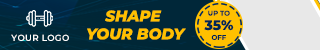
<style>
.page{position:relative;width:320px;height:50px;background:#e8e8e8}
.page>*{position:absolute;margin:0}
.t1{font:15.2px/17.9px "Montserrat-ExtraBoldItalic";color:#ffc000}
.t2{font:6.9px "Montserrat-SemiBold";color:#002754}
.t3{font:13.8px "Montserrat-ExtraBold";color:#002754}
.t4{font:8.6px "Montserrat-SemiBold";letter-spacing:0.05em;color:#ffffff}
</style>
<div class="page">
<p class="t1" style="left:87px;top:10px;width:99px;height:30px;text-align:center">SHAPE <br>YOUR BODY</p>
<p class="t2" style="left:208px;top:10px;width:22px;height:6px">UP TO</p>
<p class="t3" style="left:204px;top:20px;width:30px;height:11px">35%</p>
<p class="t4" style="left:11px;top:34px;width:58px;height:7px">YOUR LOGO</p>
<p class="t2" style="left:211px;top:34px;width:15px;height:6px">OFF</p>
</div>
